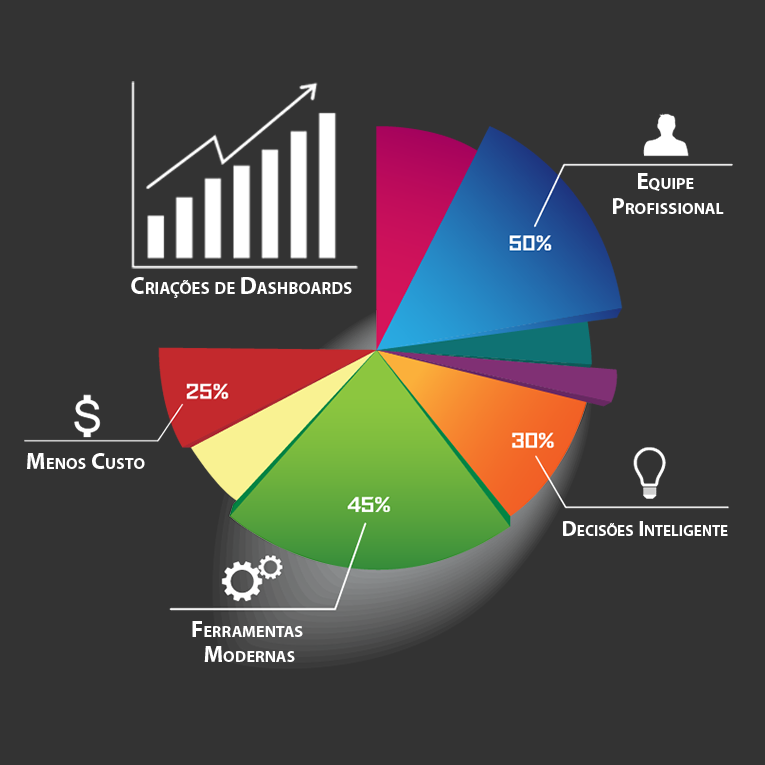
<style>
.page{position:relative;width:765px;height:765px;background:#333333}
.page>*{position:absolute;margin:0}
.t1{font:23.3px/25px "MyriadPro-Bold";color:#ffffff;font-variant:small-caps}
.t2{font:24px "MyriadPro-Bold";color:#ffffff;font-variant:small-caps}
.t3{font:23.3px "MyriadPro-Bold";color:#ffffff;font-variant:small-caps}
.t4{font:21.7px "MyriadPro-Bold";color:#ffffff;font-variant:small-caps}
</style>
<div class="page">
<p class="t1" style="left:613px;top:173px;width:111px;height:41px;text-align:center">Equipe <br>Profissional</p>
<p class="t2" style="left:131px;top:277px;width:221px;height:21px">Criações de Dashboards</p>
<p class="t3" style="left:27px;top:453px;width:118px;height:16px">Menos Custo</p>
<p class="t4" style="left:563px;top:521px;width:165px;height:15px">Decisões Inteligente</p>
<p class="t1" style="left:192px;top:621px;width:111px;height:41px;text-align:center">Ferramentas <br>Modernas</p>
</div>
